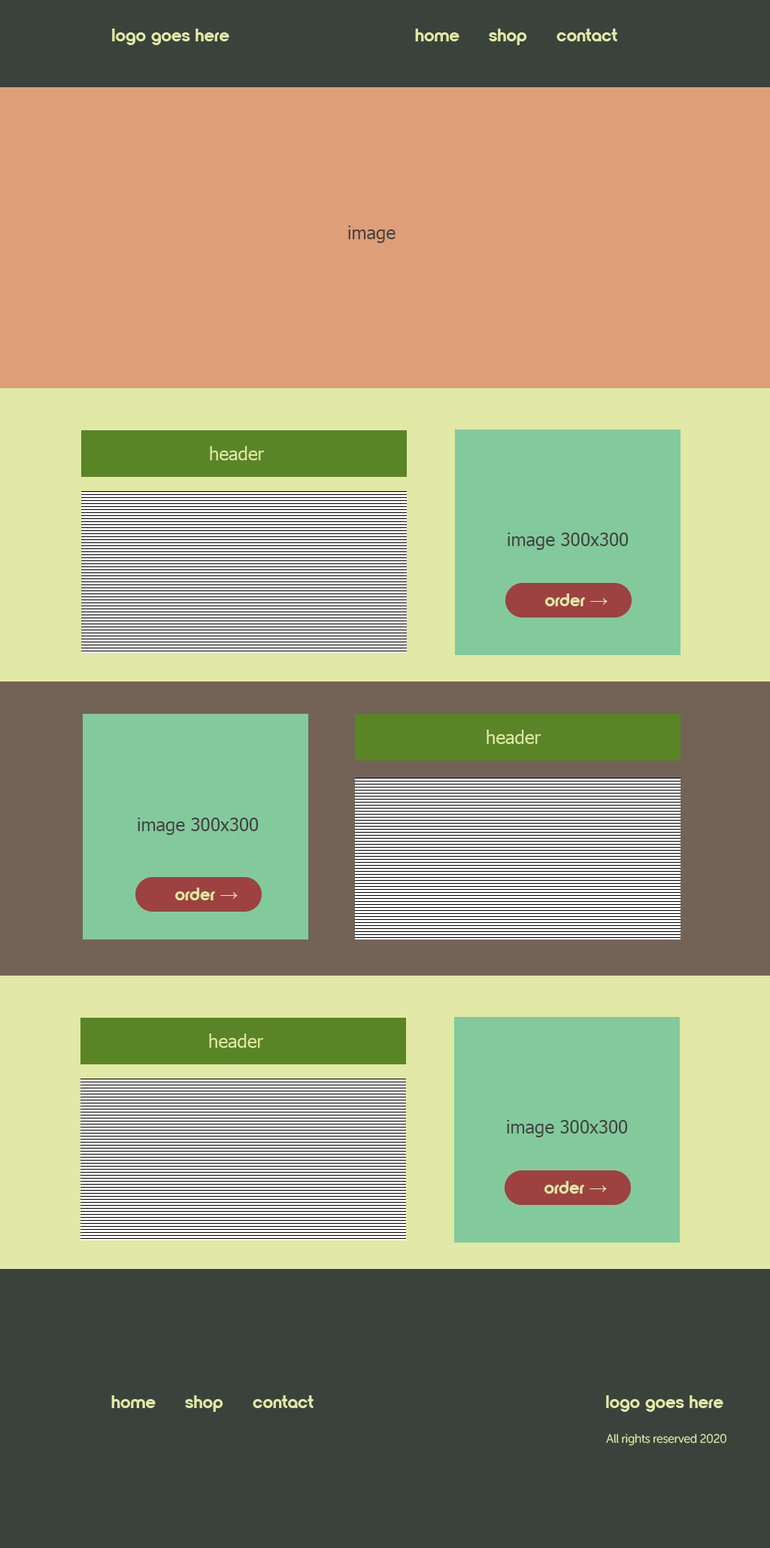
<style>
.page{position:relative;width:770px;height:1548px;background:#39433c}
.page>*{position:absolute;margin:0}
.t1{font:18.1px "NordiquePro-Bold";color:#e2e8a5}
.t2{font:18.1px "Tahoma";color:#434141}
.t3{font:18.1px "Tahoma";color:#e2e8a5}
.t4{font:18.1px "TimesNewRomanPSMT";color:#e2e8a5}
.t5{font:12px "MuseoSansCyrl-300";letter-spacing:-0.025em;color:#e2e8a5}
</style>
<div class="page">
<p class="t1" style="left:112px;top:29px;width:117px;height:16px">logo goes here</p>
<p class="t1" style="left:415px;top:29px;width:45px;height:12px">home</p>
<p class="t1" style="left:489px;top:29px;width:38px;height:16px">shop</p>
<p class="t1" style="left:557px;top:29px;width:61px;height:12px">contact</p>
<p class="t2" style="left:348px;top:226px;width:48px;height:17px">image</p>
<p class="t3" style="left:210px;top:446px;width:54px;height:14px">header</p>
<p class="t2" style="left:508px;top:533px;width:121px;height:17px">image 300x300</p>
<p class="t1" style="left:545px;top:594px;width:63px;height:12px">order <span class="t4">→</span></p>
<p class="t3" style="left:487px;top:730px;width:54px;height:14px">header</p>
<p class="t2" style="left:138px;top:818px;width:121px;height:17px">image 300x300</p>
<p class="t1" style="left:175px;top:888px;width:63px;height:12px">order <span class="t4">→</span></p>
<p class="t3" style="left:209px;top:1034px;width:54px;height:14px">header</p>
<p class="t2" style="left:507px;top:1120px;width:121px;height:17px">image 300x300</p>
<p class="t1" style="left:545px;top:1181px;width:62px;height:13px">order <span class="t4">→</span></p>
<p class="t1" style="left:111px;top:1395px;width:45px;height:13px">home</p>
<p class="t1" style="left:185px;top:1395px;width:38px;height:17px">shop</p>
<p class="t1" style="left:253px;top:1395px;width:61px;height:13px">contact</p>
<p class="t1" style="left:606px;top:1395px;width:118px;height:17px">logo goes here</p>
<p class="t5" style="left:606px;top:1434px;width:121px;height:12px">All rights reserved 2020</p>
</div>
